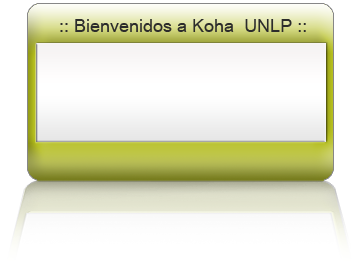
<style>
.page{position:relative;width:362px;height:261px;background:#ffffff}
.page>*{position:absolute;margin:0}
.t1{font:18px "ArialUnicodeMS";color:#2c2c2c}
</style>
<div class="page">
<p class="t1" style="left:60px;top:19px;width:246px;height:13px">:: Bienvenidos a Koha  UNLP ::</p>
</div>
